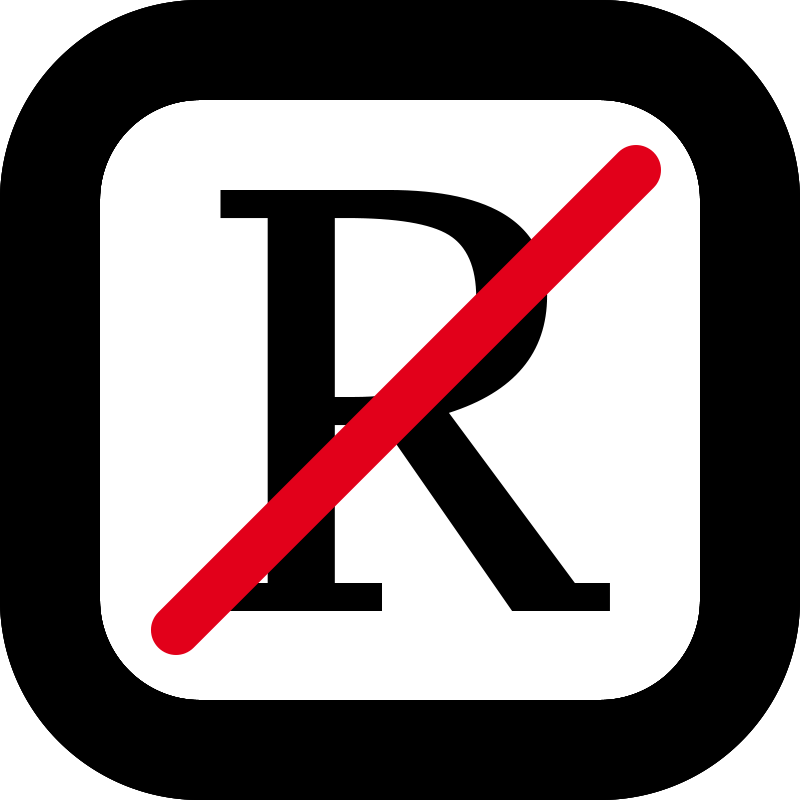
<style>
.page{position:relative;width:800px;height:800px;background:#000000}
.page>*{position:absolute;margin:0}
.t1{font:583.3px "LucidaFax";color:#000000;scale:1.12 1}
</style>
<div class="page">
<p class="t1" style="left:220px;top:190px;width:390px;height:421px">R</p>
</div>
